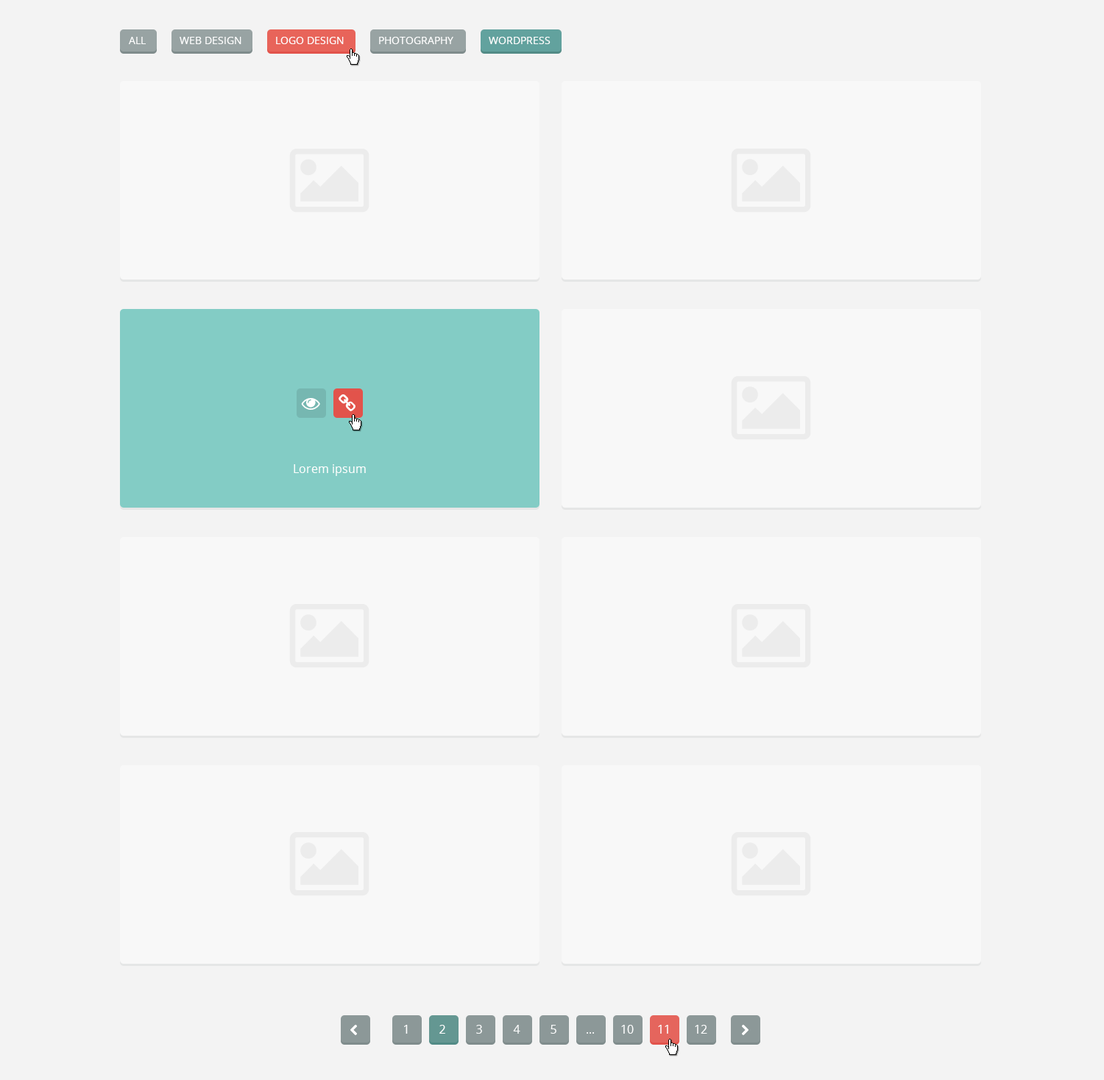
<style>
.page{position:relative;width:1104px;height:1080px;background:#f8f8f8}
.page>*{position:absolute;margin:0}
.t1{font:10.3px "OpenSans";color:#ffffff}
.t2{font:11.8px "OpenSans";color:#ffffff}
</style>
<div class="page">
<p class="t1" style="left:129px;top:37px;width:17px;height:7px">ALL</p>
<p class="t1" style="left:180px;top:37px;width:61px;height:7px">WEB DESIGN</p>
<p class="t1" style="left:276px;top:37px;width:68px;height:7px">LOGO DESIGN</p>
<p class="t1" style="left:379px;top:37px;width:74px;height:7px">PHOTOGRAPHY</p>
<p class="t1" style="left:489px;top:37px;width:61px;height:7px">WORDPRESS</p>
<p class="t2" style="left:294px;top:464px;width:72px;height:12px">Lorem ipsum</p>
<p class="t2" style="left:404px;top:1025px;width:4px;height:9px">1</p>
<p class="t2" style="left:439px;top:1025px;width:6px;height:9px">2</p>
<p class="t2" style="left:476px;top:1025px;width:6px;height:9px">3</p>
<p class="t2" style="left:513px;top:1025px;width:7px;height:9px">4</p>
<p class="t2" style="left:550px;top:1025px;width:6px;height:9px">5</p>
<p class="t2" style="left:621px;top:1025px;width:13px;height:9px">10</p>
<p class="t2" style="left:658px;top:1025px;width:10px;height:9px">11</p>
<p class="t2" style="left:695px;top:1025px;width:12px;height:9px">12</p>
<p class="t2" style="left:586px;top:1032px;width:8px;height:2px">...</p>
</div>
